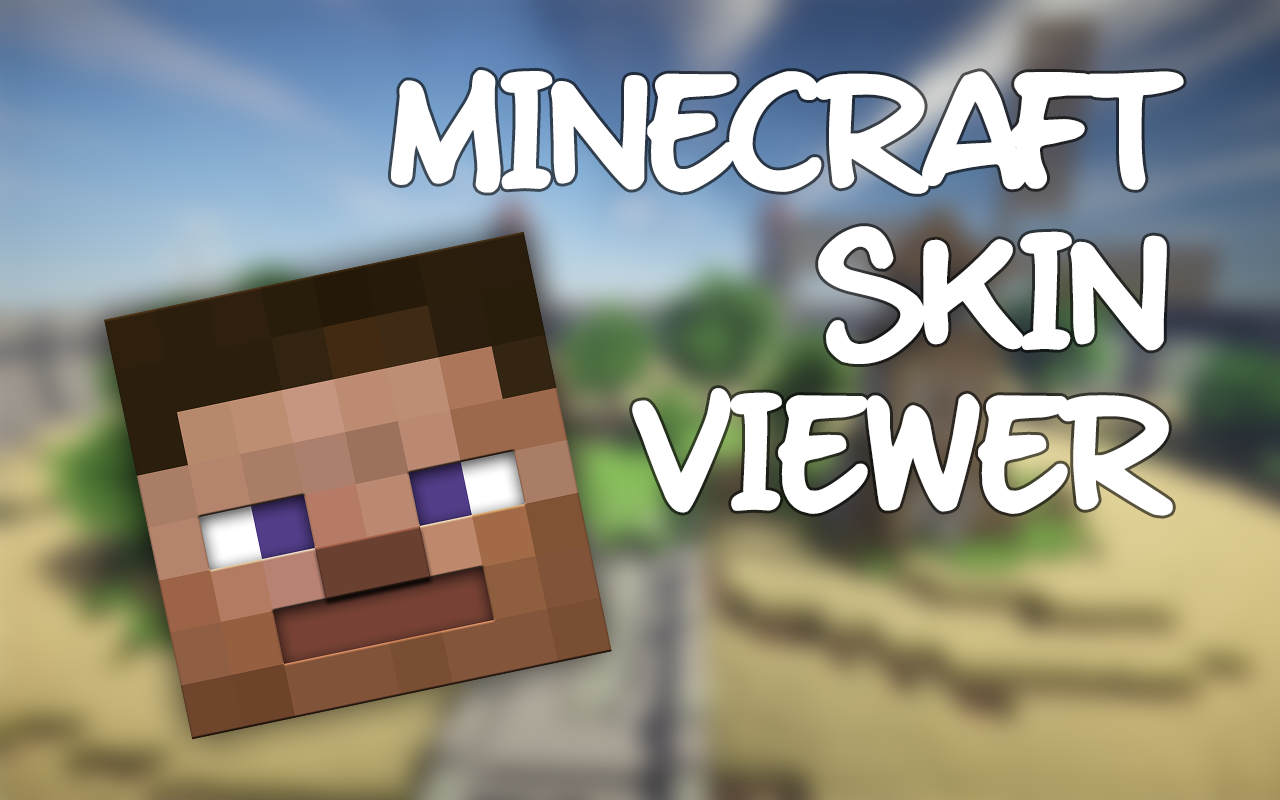
<style>
.page{position:relative;width:1280px;height:800px}
.page>*{position:absolute;margin:0}
.t1{font:134px "mixtapeMike_TRIAL";letter-spacing:0.02em;color:#ffffff;text-transform:uppercase}
</style>
<div class="page">
<p class="t1" style="left:391px;top:70px;width:793px;height:446px;text-align:right">Minecraft<br>Skin<br> Viewer</p>
</div>
